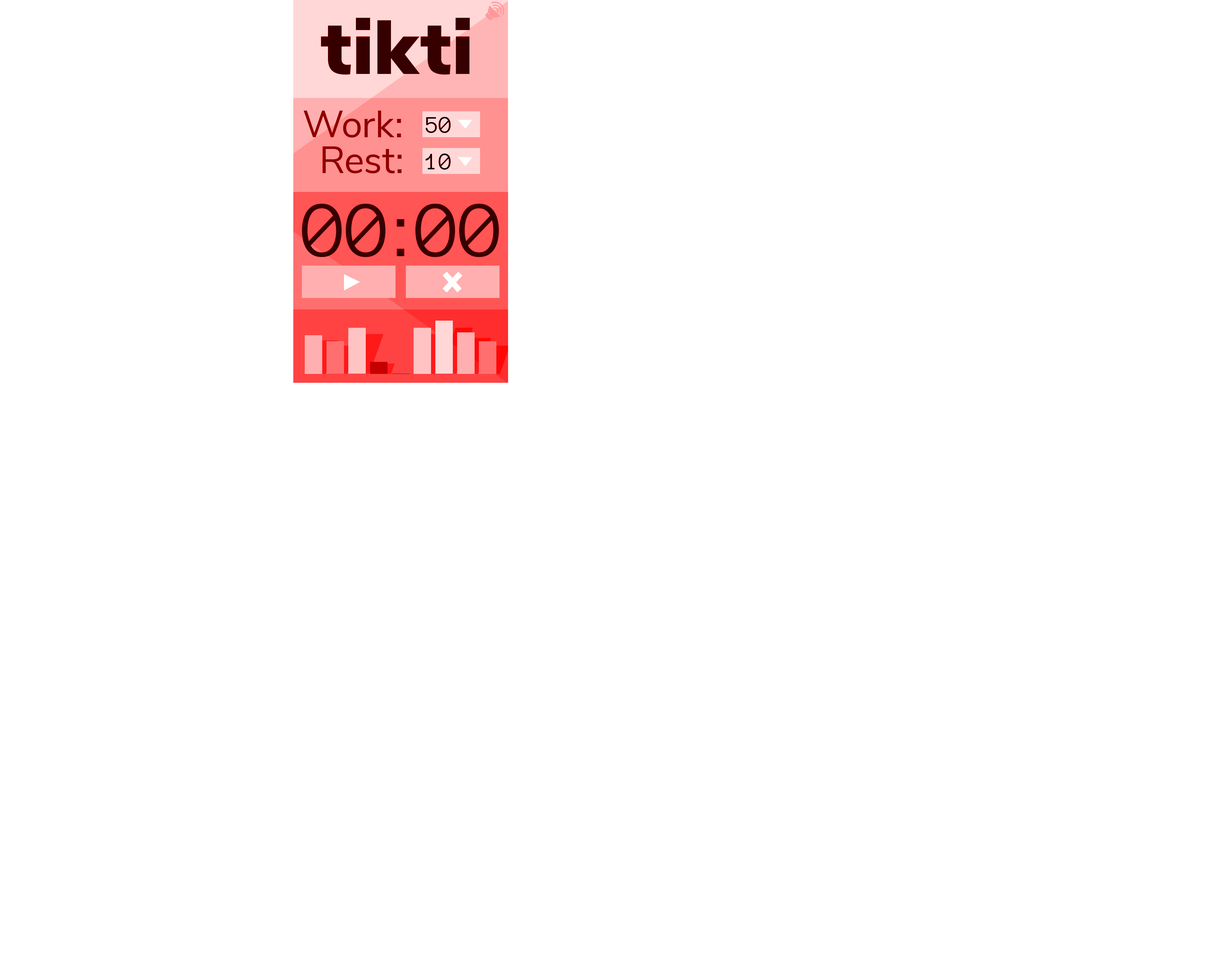
<style>
.page{position:relative;width:1231px;height:969px;background:#ffffff}
.page>*{position:absolute;margin:0}
.t1{font:76px "NunitoSans-Black";letter-spacing:0.01em;color:#360000}
.t2{font:37.8px "NunitoSans-Regular";letter-spacing:0.01em;color:#8a0000}
.t3{font:24.2px "AnonymousPro";letter-spacing:0.01em;color:#000000}
.t4{font:81px "AnonymousPro";letter-spacing:0.01em;color:#360000}
</style>
<div class="page">
<p class="t1" style="left:321px;top:18px;width:149px;height:57px">tikti</p>
<p class="t2" style="left:304px;top:111px;width:97px;height:26px">Work:</p>
<p class="t3" style="left:426px;top:117px;width:25px;height:16px">50</p>
<p class="t2" style="left:323px;top:146px;width:79px;height:27px">Rest:</p>
<p class="t3" style="left:426px;top:154px;width:25px;height:16px">10</p>
<p class="t4" style="left:302px;top:204px;width:197px;height:53px">00:00</p>
</div>
